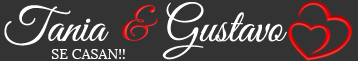
<style>
.page{position:relative;width:358px;height:61px;background:#333333}
.page>*{position:absolute;margin:0}
.t1{font:48px "GreatVibes-Regular";color:#ffffff}
.t2{font:48px "GreatVibes-Regular"}
.t3{font:14.2px "Lora-Regular";color:#ffffff}
</style>
<div class="page">
<p class="t1" style="left:4px;top:5px;width:105px;height:41px">Tania</p>
<p class="t2" style="left:121px;top:4px;width:37px;height:37px">&amp;</p>
<p class="t1" style="left:162px;top:2px;width:125px;height:58px">Gustavo</p>
<p class="t3" style="left:51px;top:49px;width:74px;height:10px">SE CASAN!!</p>
</div>
